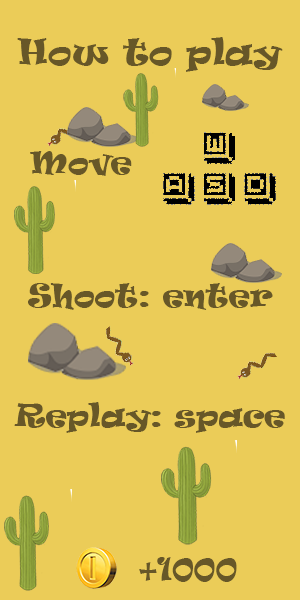
<style>
.page{position:relative;width:300px;height:600px;background:#ebcc58}
.page>*{position:absolute;margin:0}
.t1{font:33.3px "Ravie";color:#675728}
.t2{font:29.2px "Ravie";color:#675728}
</style>
<div class="page">
<p class="t1" style="left:17px;top:37px;width:266px;height:35px">How to play</p>
<p class="t2" style="left:30px;top:151px;width:102px;height:25px">Move</p>
<p class="t2" style="left:28px;top:283px;width:245px;height:27px">Shoot: enter</p>
<p class="t2" style="left:14px;top:402px;width:271px;height:31px">Replay: space</p>
<p class="t2" style="left:139px;top:557px;width:98px;height:25px">+1000</p>
</div>
